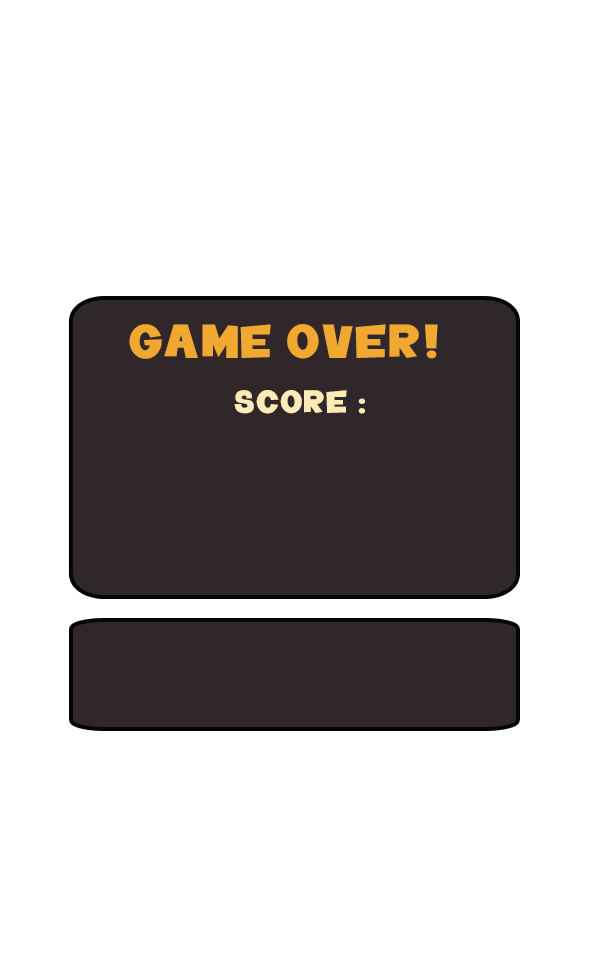
<style>
.page{position:relative;width:590px;height:960px;background:#ffffff}
.page>*{position:absolute;margin:0}
.t1{font:48px "TeletoonLowercase";letter-spacing:0.025em;color:#f0a830}
.t2{font:32.4px "TeletoonLowercase";letter-spacing:0.025em;color:#fcebb6}
</style>
<div class="page">
<p class="t1" style="left:129px;top:324px;width:309px;height:35px">GAME OVER!</p>
<p class="t2" style="left:234px;top:390px;width:131px;height:24px">SCORE :</p>
</div>
